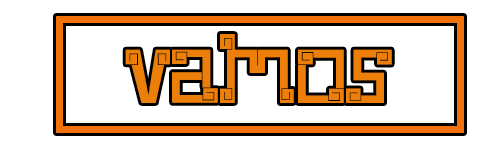
<style>
.page{position:relative;width:500px;height:150px;background:#ffffff}
.page>*{position:absolute;margin:0}
.t1{font:72px "New-Wave-Aztec-Regular";color:#eb7f0a}
</style>
<div class="page">
<p class="t1" style="left:125px;top:34px;width:267px;height:69px">vamos</p>
</div>
